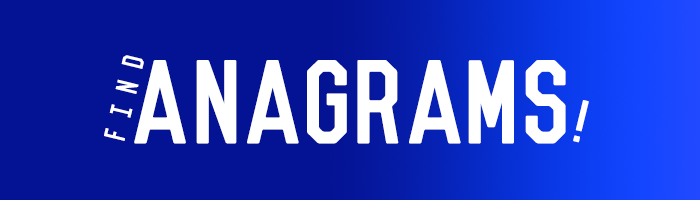
<style>
.page{position:relative;width:700px;height:200px;background:#041394}
.page>*{position:absolute;margin:0}
.t1{font:28px "Vincent-Regular";letter-spacing:0.5em;color:#ffffff;scale:0.96 1}
.t2{font:109.3px "Vincent-Regular";color:#ffffff}
.t3{font:55.6px "Vincent-Regular";color:#ffffff}
</style>
<div class="page">
<p class="t1" style="left:104px;top:55px;width:40px;height:86px;rotate:-76deg">Find</p>
<p class="t2" style="left:134px;top:60px;width:432px;height:84px">aNAGRAMs</p>
<p class="t3" style="left:573px;top:100px;width:16px;height:43px;rotate:14deg">!</p>
</div>
